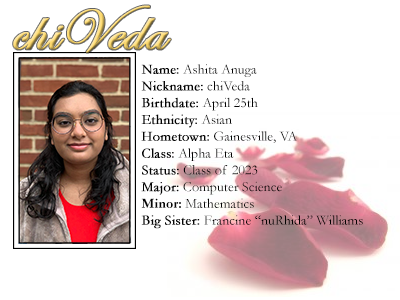
<style>
.page{position:relative;width:400px;height:300px;background:#ffffff}
.page>*{position:absolute;margin:0}
.t1{font:60px "EdwardianScriptITC";font-weight:bold}
.t2{font:14px "Garamond";color:#000000}
.t3{font:14px "Garamond";color:#000000;font-weight:bold}
.t4{font:14px "Garamond-Bold";color:#000000}
</style>
<div class="page">
<p class="t1" style="left:13px;top:5px;width:158px;height:48px">chiVeda</p>
<p class="t2" style="left:141px;top:64px;width:222px;height:165px"><span class="t3">Name:</span> Ashita Anuga<br><span class="t3">Nickname:</span> chiVeda<br><span class="t3">Birthdate:</span> April 25th<br><span class="t3">Ethnicity:</span> Asian<br><span class="t3">Hometown:</span> Gainesville, VA<br><span class="t3">Class:</span> Alpha Eta<br><span class="t3">Status:</span> Class of 2023<br><span class="t3">Major:</span> Computer Science<br><span class="t4">Minor:</span> Mathematics<br><span class="t3">Big Sister: </span>Francine “nuRhida” Williams</p>
</div>
